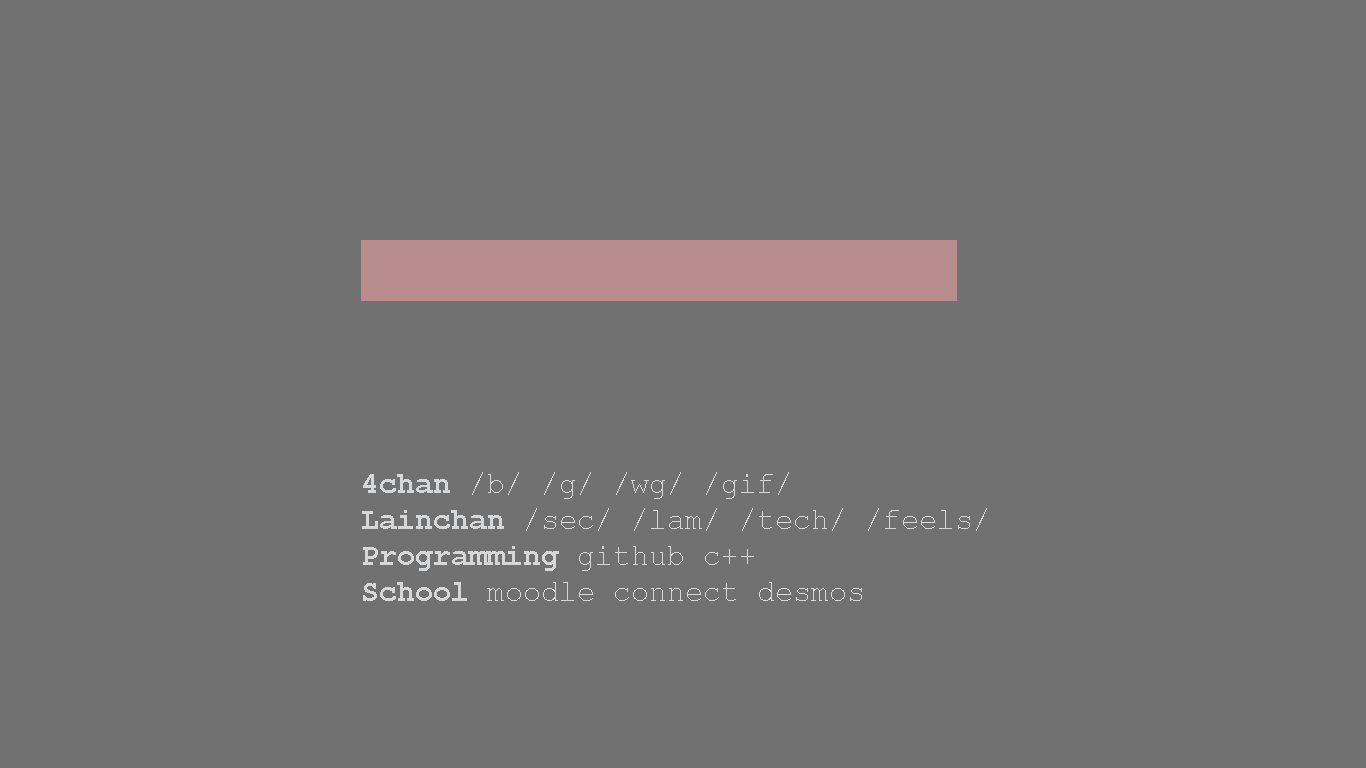
<style>
.page{position:relative;width:1366px;height:768px;background:#717171}
.page>*{position:absolute;margin:0}
.t1{font:30px "CourierNewPSMT";color:#d6d7d9}
.t2{font:30px "CourierNewPS-BoldMT";color:#d6d7d9}
</style>
<div class="page">
<p class="t1" style="left:362px;top:472px;width:625px;height:129px"><span class="t2">4chan </span>/b/ /g/ /wg/ /gif/<br><span class="t2">Lainchan </span>/sec/ /lam/ /tech/ /feels/<br><span class="t2">Programming </span>github c++ <br><span class="t2">School </span>moodle connect desmos</p>
</div>
